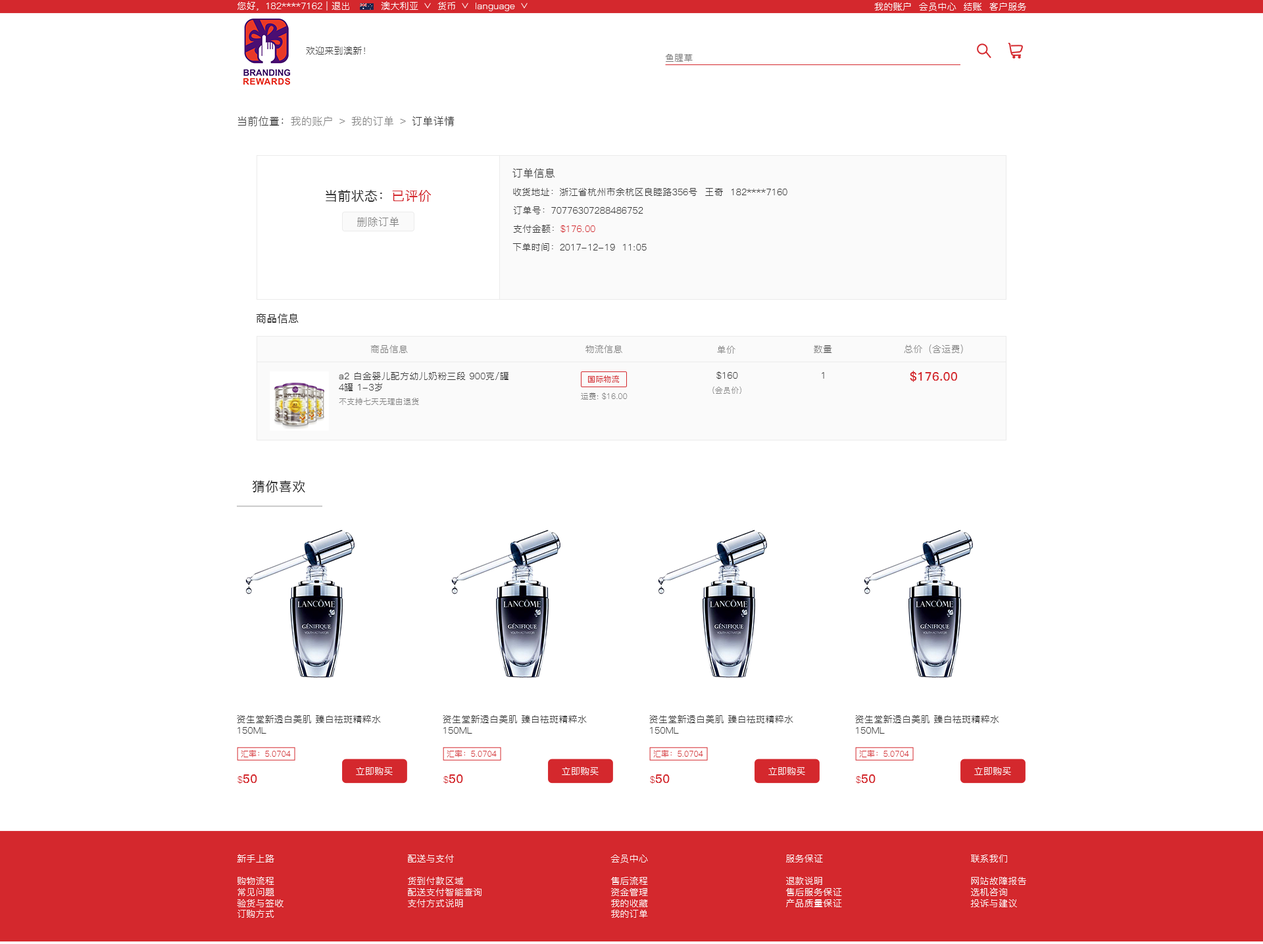
<style>
.page{position:relative;width:1263px;height:944px;background:#ffffff}
.page>*{position:absolute;margin:0}
.t1{font:9.2px "PingFang-SC-Regular";letter-spacing:0.02em;color:#ffffff}
.t2{font:9.2px "PingFang-SC-Regular";letter-spacing:0.02em;color:#333333}
.t3{font:9.2px "PingFang-SC-Regular";letter-spacing:0.02em;color:#767676}
.t4{font:10.5px "PingFang-SC-Regular";letter-spacing:0.02em;color:#808080}
.t5{font:10.5px "PingFang-SC-Regular";letter-spacing:0.02em;color:#333333}
.t6{font:13.2px "PingFang-SC-Medium";letter-spacing:0.02em;color:#333333}
.t7{font:13.2px "PingFang-SC-Medium";letter-spacing:0.02em;color:#d4282d}
.t8{font:9.2px "PingFang-SC-Regular";letter-spacing:0.02em;color:#343434}
.t9{font:9.2px "PingFang-SC-Regular";letter-spacing:0.02em;color:#d4282d}
.t10{font:10.5px "PingFang-SC-Medium";letter-spacing:0.02em;color:#333333}
.t11{font:9.2px "PingFang-SC-Regular";letter-spacing:0.02em;color:#808080}
.t12{font:7.9px "PingFang-SC-Medium";letter-spacing:0.02em;color:#d4282d}
.t13{font:11.8px "PingFang-SC-Bold";letter-spacing:0.02em;color:#d4282d}
.t14{font:7.9px "PingFang-SC-Regular";letter-spacing:0.02em;color:#808080}
.t15{font:7.9px "PingFang-SC-Regular";letter-spacing:0.02em;color:#d4282d}
.t16{font:9.2px "PingFang-SC-Regular";letter-spacing:0.02em;color:#fffefe}
</style>
<div class="page">
<p class="t1" style="left:237px;top:1px;width:112px;height:10px">您好，182****7162 | 退出</p>
<p class="t1" style="left:381px;top:1px;width:37px;height:9px">澳大利亚</p>
<p class="t1" style="left:437px;top:2px;width:18px;height:8px">货币</p>
<p class="t1" style="left:475px;top:3px;width:40px;height:8px">language</p>
<p class="t1" style="left:874px;top:2px;width:152px;height:9px">我的账户  会员中心  结账  客户服务</p>
<p class="t2" style="left:306px;top:46px;width:59px;height:9px">欢迎来到澳新！</p>
<p class="t3" style="left:665px;top:54px;width:27px;height:8px">鱼腥草</p>
<p class="t4" style="left:237px;top:116px;width:217px;height:10px"><span class="t5">当前位置：</span>我的账户 ﹥ 我的订单 ﹥<span class="t5"> 订单详情</span></p>
<p class="t5" style="left:512px;top:168px;width:42px;height:10px">订单信息</p>
<p class="t6" style="left:326px;top:189px;width:105px;height:13px">当前状态：<span class="t7">已评价</span></p>
<p class="t2" style="left:513px;top:187px;width:274px;height:9px">收货地址：浙江省杭州市余杭区良睦路356号  王奇  182****7160</p>
<p class="t8" style="left:513px;top:206px;width:130px;height:8px"><span class="t2">订单号：</span>70776307288486752</p>
<p class="t4" style="left:357px;top:217px;width:42px;height:10px">删除订单</p>
<p class="t9" style="left:513px;top:224px;width:82px;height:9px"><span class="t2">支付金额：</span>$176.00</p>
<p class="t2" style="left:512px;top:243px;width:134px;height:8px">下单时间：2017-12-19  11:05</p>
<p class="t10" style="left:256px;top:314px;width:43px;height:10px">商品信息</p>
<p class="t11" style="left:370px;top:345px;width:38px;height:8px">商品信息</p>
<p class="t11" style="left:585px;top:345px;width:37px;height:8px">物流信息</p>
<p class="t11" style="left:717px;top:346px;width:18px;height:8px">单价</p>
<p class="t11" style="left:814px;top:345px;width:18px;height:8px">数量</p>
<p class="t11" style="left:904px;top:345px;width:59px;height:9px">总价（含运费）</p>
<p class="t2" style="left:339px;top:372px;width:169px;height:19px">a2 白金婴儿配方幼儿奶粉三段 900克/罐 <br>4罐 1-3岁</p>
<p class="t12" style="left:588px;top:376px;width:31px;height:7px">国际物流</p>
<p class="t2" style="left:716px;top:372px;width:22px;height:7px">$160</p>
<p class="t2" style="left:821px;top:372px;width:3px;height:7px">1</p>
<p class="t13" style="left:910px;top:371px;width:47px;height:11px">$176.00</p>
<p class="t14" style="left:712px;top:387px;width:29px;height:7px">(会员价)</p>
<p class="t14" style="left:339px;top:398px;width:80px;height:7px">不支持七天无理由退货</p>
<p class="t14" style="left:581px;top:393px;width:46px;height:7px">运费: $16.00</p>
<p class="t6" style="left:253px;top:480px;width:52px;height:13px">猜你喜欢</p>
<p class="t2" style="left:237px;top:715px;width:144px;height:19px">资生堂新透白美肌 臻白祛斑精粹水<br>150ML</p>
<p class="t2" style="left:443px;top:715px;width:144px;height:19px">资生堂新透白美肌 臻白祛斑精粹水<br>150ML</p>
<p class="t2" style="left:649px;top:715px;width:144px;height:19px">资生堂新透白美肌 臻白祛斑精粹水<br>150ML</p>
<p class="t2" style="left:855px;top:715px;width:144px;height:19px">资生堂新透白美肌 臻白祛斑精粹水<br>150ML</p>
<p class="t15" style="left:241px;top:750px;width:50px;height:8px">汇率：5.0704</p>
<p class="t15" style="left:447px;top:750px;width:50px;height:8px">汇率：5.0704</p>
<p class="t15" style="left:653px;top:750px;width:50px;height:8px">汇率：5.0704</p>
<p class="t15" style="left:859px;top:750px;width:50px;height:8px">汇率：5.0704</p>
<p class="t1" style="left:356px;top:767px;width:37px;height:8px">立即购买</p>
<p class="t1" style="left:562px;top:767px;width:36px;height:8px">立即购买</p>
<p class="t1" style="left:768px;top:767px;width:37px;height:8px">立即购买</p>
<p class="t1" style="left:974px;top:767px;width:37px;height:8px">立即购买</p>
<p class="t13" style="left:237px;top:775px;width:20px;height:9px"><span class="t9">$</span>50</p>
<p class="t13" style="left:443px;top:775px;width:20px;height:9px"><span class="t9">$</span>50</p>
<p class="t13" style="left:650px;top:775px;width:19px;height:9px"><span class="t9">$</span>50</p>
<p class="t13" style="left:856px;top:775px;width:19px;height:9px"><span class="t9">$</span>50</p>
<p class="t16" style="left:237px;top:854px;width:46px;height:64px">新手上路<br><br>购物流程<br>常见问题<br>验货与签收<br>订购方式</p>
<p class="t16" style="left:408px;top:854px;width:73px;height:54px">配送与支付<br><br>货到付款区域<br>配送支付智能查询<br>支付方式说明</p>
<p class="t16" style="left:610px;top:855px;width:38px;height:63px">会员中心<br><br>售后流程<br>资金管理<br>我的收藏<br>我的订单</p>
<p class="t16" style="left:786px;top:855px;width:56px;height:53px">服务保证<br><br>退款说明<br>售后服务保证<br>产品质量保证</p>
<p class="t16" style="left:970px;top:855px;width:56px;height:53px">联系我们<br><br>网站故障报告<br>选机咨询<br>投诉与建议</p>
</div>
